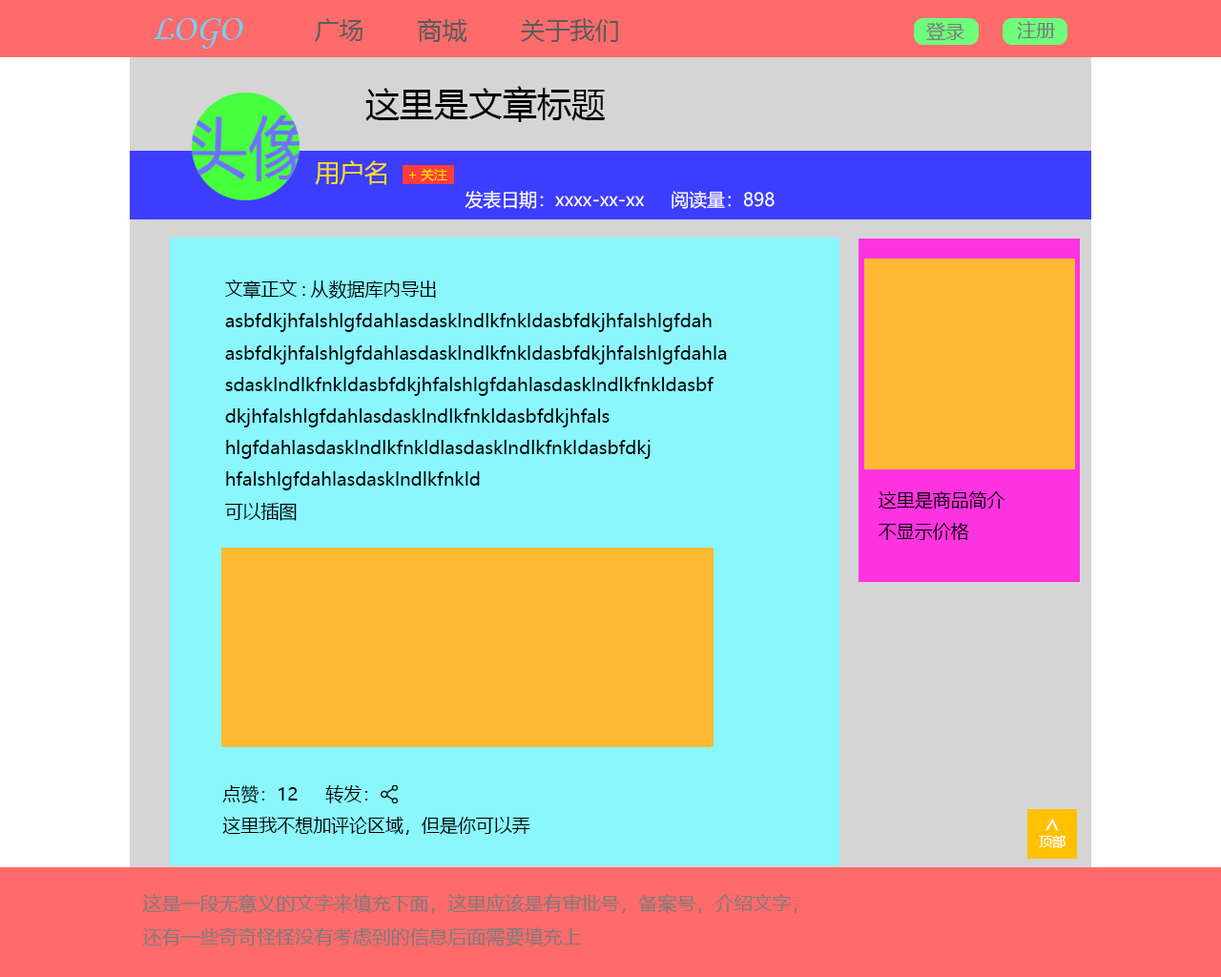
<style>
.page{position:relative;width:1221px;height:977px;background:#8af7fd}
.page>*{position:absolute;margin:0}
.t1{font:24.8px "MicrosoftYaHei";color:#5c5c5c}
.t2{font:34.3px "MicrosoftYaHei";color:#000000}
.t3{font:24.9px "MicrosoftYaHei";color:#ffde01}
.t4{font:13.4px "MicrosoftYaHei";color:#ffde01}
.t5{font:18.1px "MicrosoftYaHei";color:#ffffff}
.t6{font:18.1px "MicrosoftYaHei";color:#000000}
.t7{font:24.9px "MicrosoftYaHei";color:#ffffff}
.t8{font:13.4px "MicrosoftYaHei";color:#ffffff}
</style>
<div class="page">
<p class="t1" style="left:314px;top:18px;width:304px;height:24px">广场  商城  关于我们</p>
<p class="t2" style="left:365px;top:86px;width:241px;height:36px">这里是文章标题</p>
<p class="t3" style="left:315px;top:160px;width:71px;height:25px">用户名</p>
<p class="t4" style="left:408px;top:168px;width:39px;height:13px">+关注</p>
<p class="t5" style="left:465px;top:190px;width:309px;height:19px">发表日期：xxxx-xx-xx 阅读量：898</p>
<p class="t6" style="left:225px;top:279px;width:502px;height:242px">文章正文:从数据库内导出<br>asbfdkjhfalshlgfdahlasdasklndlkfnkldasbfdkjhfalshlgfdah<br>asbfdkjhfalshlgfdahlasdasklndlkfnkldasbfdkjhfalshlgfdahla<br>sdasklndlkfnkldasbfdkjhfalshlgfdahlasdasklndlkfnkldasbf<br>dkjhfalshlgfdahlasdasklndlkfnkldasbfdkjhfals<br>hlgfdahlasdasklndlkfnkldlasdasklndlkfnkldasbfdkj<br>hfalshlgfdahlasdasklndlkfnkld<br>可以插图</p>
<p class="t6" style="left:878px;top:491px;width:127px;height:49px">这里是商品简介<br>不显示价格</p>
<p class="t6" style="left:222px;top:785px;width:308px;height:50px">点赞：12 转发：<br>这里我不想加评论区域，但是你可以弄</p>
<p class="t7" style="left:1045px;top:818px;width:14px;height:13px;rotate:-90deg">&gt;</p>
<p class="t8" style="left:1039px;top:835px;width:26px;height:13px">顶部</p>
</div>
